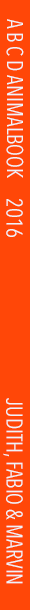
<style>
.page{position:relative;width:30px;height:610px;background:#ff4708}
.page>*{position:absolute;margin:0}
.t1{font:22.4px "AvenirNextCondensed-Regular";color:#eff3f6;scale:0.94 1}
</style>
<div class="page">
<p class="t1" style="left:6px;top:19px;width:18px;height:159px;rotate:90deg">A B C D ANIMALBOOK</p>
<p class="t1" style="left:6px;top:199px;width:17px;height:38px;rotate:90deg">2016</p>
<p class="t1" style="left:3px;top:398px;width:20px;height:186px;rotate:90deg">JUDITH, FABIO &amp; MARVIN</p>
</div>
